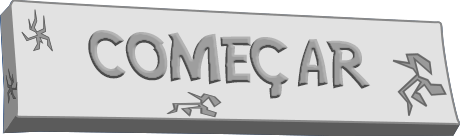
<style>
.page{position:relative;width:460px;height:136px;background:#e2e2e2}
.page>*{position:absolute;margin:0}
.t1{font:68.4px "Adventure";color:#9e9e9e;scale:0.87 1}
</style>
<div class="page">
<p class="t1" style="left:88px;top:30px;width:283px;height:69px;rotate:3deg">COMEÇAR</p>
</div>
